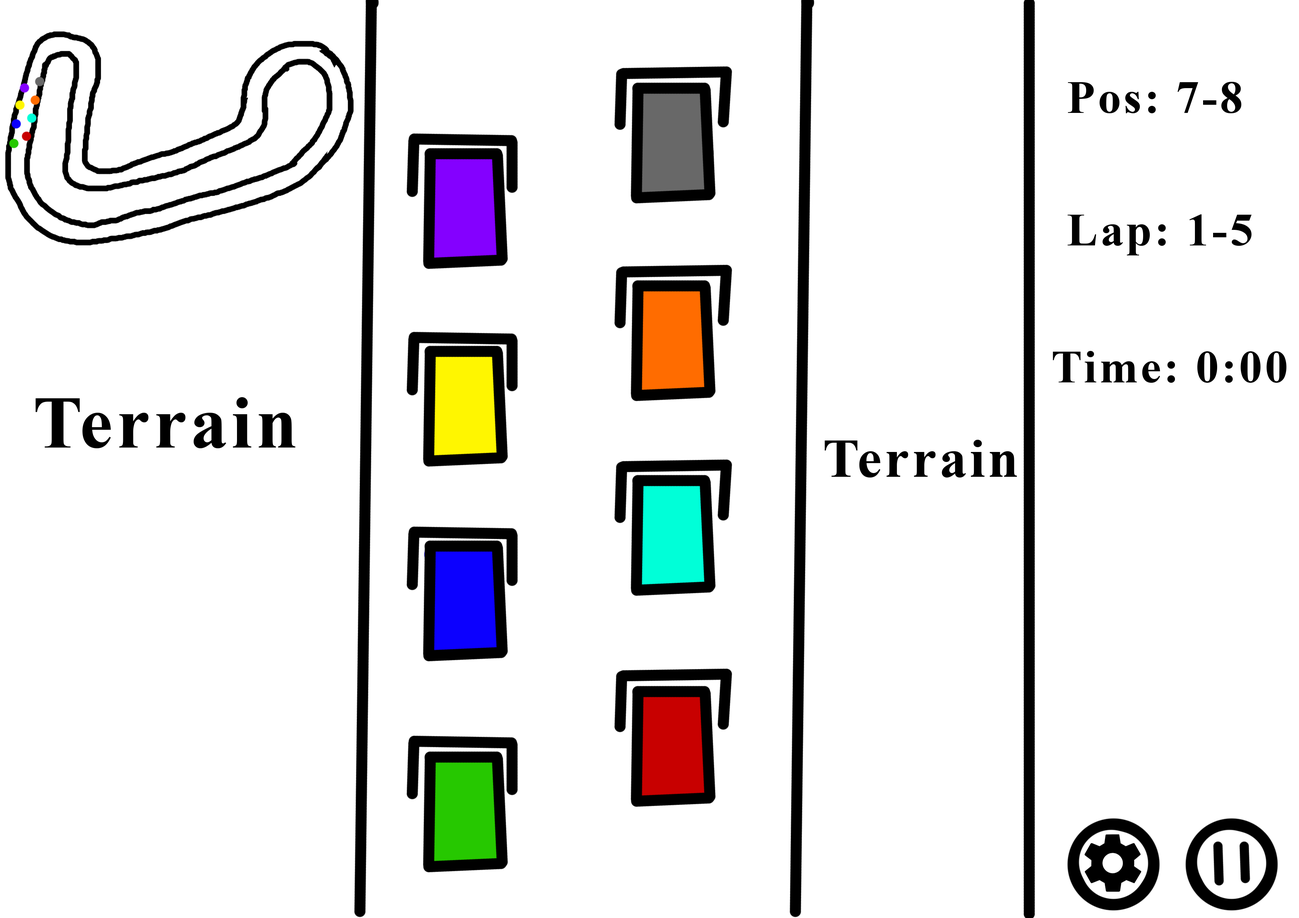
<style>
.page{position:relative;width:1299px;height:918px;background:#ffffff}
.page>*{position:absolute;margin:0}
.t1{font:46.3px "TimesNewRomanPS-BoldMT";letter-spacing:0.055em;color:#000000}
.t2{font:74px "TimesNewRomanPS-BoldMT";letter-spacing:0.055em;color:#000000}
.t3{font:54.7px "TimesNewRomanPS-BoldMT";letter-spacing:0.055em;color:#000000}
</style>
<div class="page">
<p class="t1" style="left:1068px;top:82px;width:173px;height:31px">Pos: 7-8</p>
<p class="t1" style="left:1067px;top:214px;width:184px;height:41px">Lap: 1-5</p>
<p class="t1" style="left:1053px;top:351px;width:233px;height:32px">Time: 0:00</p>
<p class="t2" style="left:36px;top:397px;width:259px;height:51px">Terrain</p>
<p class="t3" style="left:824px;top:440px;width:193px;height:38px">Terrain</p>
</div>
